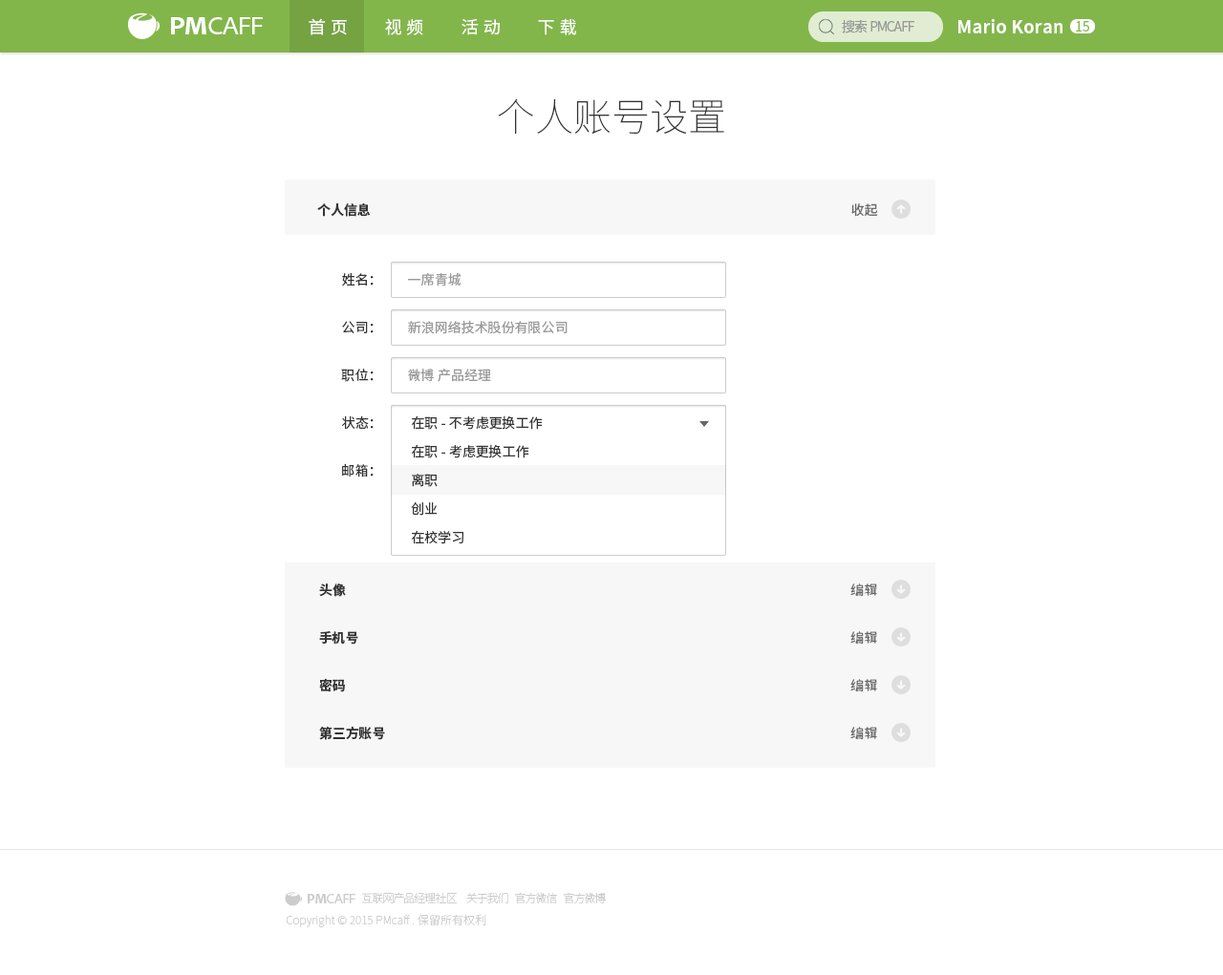
<style>
.page{position:relative;width:1223px;height:975px;background:#ffffff}
.page>*{position:absolute;margin:0}
.t1{font:26px "CleanPro-05pt";letter-spacing:-0.085em;color:#ffffff}
.t2{font:26.2px "CleanPro-Bold05pt";letter-spacing:-0.085em;color:#ffffff}
.t3{font:17.2px "NotoSansHans-Regular";letter-spacing:0.27em;color:#ffffff}
.t4{font:13.4px "NotoSansHans-DemiLight";letter-spacing:-0.085em;color:#999999}
.t5{font:17.2px "NotoSansHans-Bold";color:#ffffff;scale:1.04 1}
.t6{font:13.4px "NotoSansHans-Regular";color:#82b64a}
.t7{font:38.2px "NotoSansHans-Thin";color:#333333}
.t8{font:13.4px "NotoSansHans-Bold";color:#333333}
.t9{font:13.4px "NotoSansHans-Regular";color:#666666}
.t10{font:13.4px "NotoSansHans-Regular";color:#333333}
.t11{font:13.4px "NotoSansHans-Regular";color:#999999}
.t12{font:11.5px "NotoSansHans-Thin";letter-spacing:-0.085em;color:#cccccc}
.t13{font:13.4px "CleanPro-05pt";letter-spacing:-0.085em;color:#cccccc}
.t14{font:13.5px "CleanPro-Bold05pt";letter-spacing:-0.085em;color:#cccccc}
.t15{font:11.5px "NotoSansHans-Thin";color:#cccccc}
</style>
<div class="page">
<p class="t1" style="left:171px;top:17px;width:92px;height:17px"><span class="t2">PM</span>CAFF</p>
<p class="t3" style="left:309px;top:18px;width:38px;height:17px">首页</p>
<p class="t3" style="left:385px;top:18px;width:38px;height:17px">视频</p>
<p class="t3" style="left:461px;top:18px;width:39px;height:17px">活动</p>
<p class="t3" style="left:538px;top:18px;width:38px;height:17px">下载</p>
<p class="t4" style="left:842px;top:20px;width:72px;height:13px">搜索PMCAFF</p>
<p class="t5" style="left:958px;top:19px;width:104px;height:14px">Mario Koran</p>
<p class="t6" style="left:1076px;top:21px;width:13px;height:11px">15</p>
<p class="t7" style="left:498px;top:98px;width:226px;height:36px">个人账号设置</p>
<p class="t8" style="left:317px;top:203px;width:53px;height:14px">个人信息</p>
<p class="t9" style="left:851px;top:203px;width:27px;height:14px">收起</p>
<p class="t10" style="left:342px;top:272px;width:31px;height:15px">姓名：</p>
<p class="t11" style="left:408px;top:273px;width:53px;height:14px">一席青城</p>
<p class="t10" style="left:342px;top:321px;width:31px;height:12px">公司：</p>
<p class="t11" style="left:408px;top:320px;width:159px;height:14px">新浪网络技术股份有限公司</p>
<p class="t10" style="left:341px;top:369px;width:32px;height:13px">职位：</p>
<p class="t11" style="left:408px;top:369px;width:83px;height:13px">微博 产品经理</p>
<p class="t10" style="left:342px;top:416px;width:31px;height:13px">状态：</p>
<p class="t10" style="left:411px;top:416px;width:132px;height:14px">在职- 不考虑更换工作</p>
<p class="t10" style="left:411px;top:444px;width:118px;height:15px">在职- 考虑更换工作</p>
<p class="t10" style="left:342px;top:463px;width:31px;height:15px">邮箱：</p>
<p class="t10" style="left:412px;top:474px;width:25px;height:13px">离职</p>
<p class="t10" style="left:411px;top:502px;width:26px;height:14px">创业</p>
<p class="t10" style="left:411px;top:530px;width:52px;height:14px">在校学习</p>
<p class="t8" style="left:319px;top:584px;width:27px;height:13px">头像</p>
<p class="t9" style="left:850px;top:584px;width:27px;height:13px">编辑</p>
<p class="t8" style="left:319px;top:630px;width:39px;height:15px">手机号</p>
<p class="t9" style="left:850px;top:631px;width:27px;height:14px">编辑</p>
<p class="t8" style="left:319px;top:678px;width:26px;height:15px">密码</p>
<p class="t9" style="left:850px;top:679px;width:27px;height:14px">编辑</p>
<p class="t8" style="left:319px;top:726px;width:66px;height:14px">第三方账号</p>
<p class="t9" style="left:850px;top:727px;width:27px;height:13px">编辑</p>
<p class="t12" style="left:362px;top:892px;width:96px;height:13px">互联网产品经理社区</p>
<p class="t12" style="left:466px;top:892px;width:42px;height:12px">关于我们</p>
<p class="t12" style="left:515px;top:892px;width:42px;height:13px">官方微信</p>
<p class="t12" style="left:564px;top:892px;width:43px;height:13px">官方微博</p>
<p class="t13" style="left:308px;top:894px;width:47px;height:10px"><span class="t14">PM</span>CAFF</p>
<p class="t15" style="left:286px;top:914px;width:200px;height:14px">Copyright © 2015 PMcaff . 保留所有权利</p>
</div>
